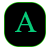
<style>
.page{position:relative;width:50px;height:50px;background:#000000}
.page>*{position:absolute;margin:0}
.t1{font:30px "TimesNewRomanPSMT";color:#07cb79}
</style>
<div class="page">
<p class="t1" style="left:15px;top:11px;width:22px;height:21px">A</p>
</div>
